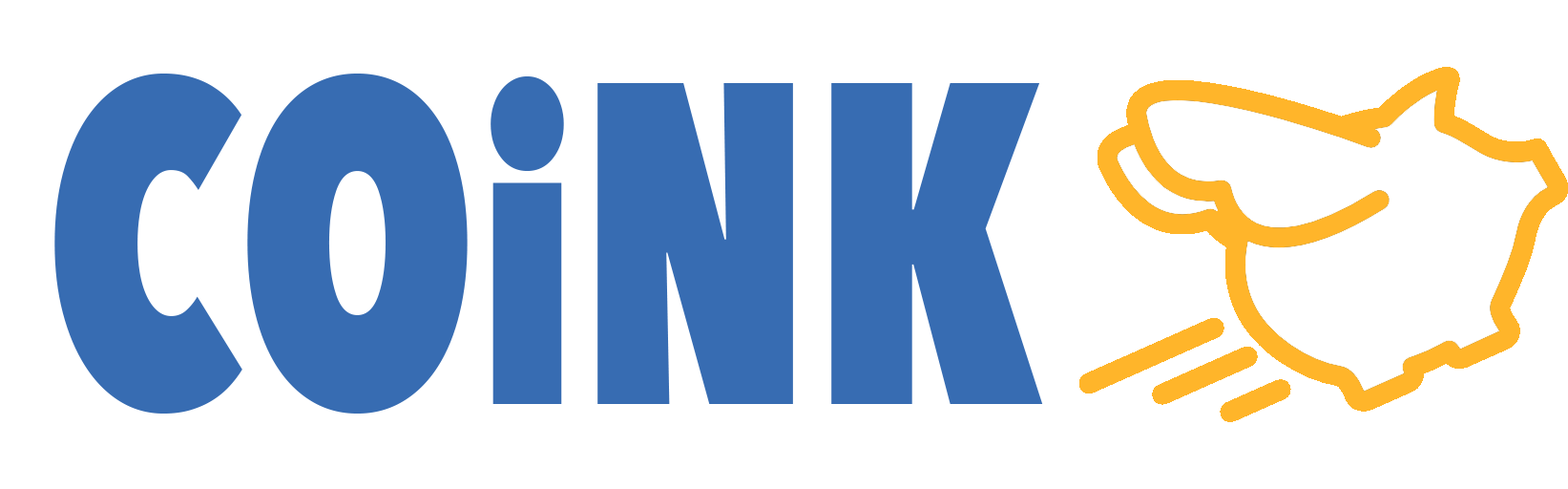
<style>
.page{position:relative;width:1568px;height:489px;background:#ffffff}
.page>*{position:absolute;margin:0}
.t1{font:453px "AvenirNextCondensed-Heavy";color:#376cb2;scale:0.82 1}
.t2{font:411.6px "AvenirNextCondensed-Heavy";color:#376cb2;scale:0.82 1}
</style>
<div class="page">
<p class="t1" style="left:54px;top:73px;width:989px;height:340px">CO<span class="t2">i</span>NK</p>
</div>
